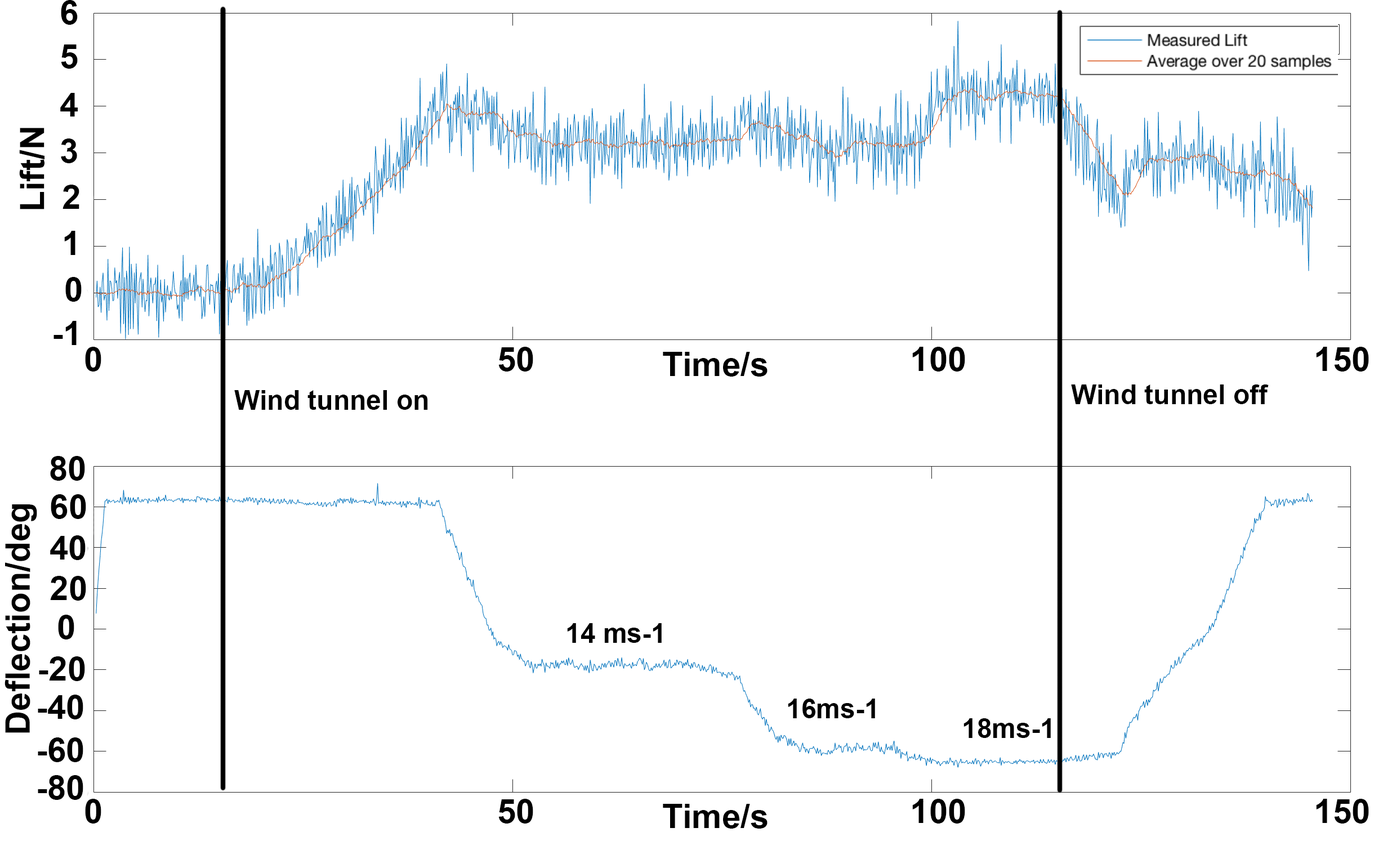
<style>
.page{position:relative;width:1374px;height:868px;background:#ffffff}
.page>*{position:absolute;margin:0}
.t1{font:33.8px "Arial-BoldMT";color:#000000}
.t2{font:33.7px "Arial-BoldMT";color:#000000}
.t3{font:34px "Arial-BoldMT";color:#000000}
</style>
<div class="page">
<p class="t1" style="left:61px;top:0px;width:17px;height:25px">6</p>
<p class="t1" style="left:61px;top:44px;width:17px;height:25px">5</p>
<p class="t1" style="left:60px;top:93px;width:18px;height:24px">4</p>
<p class="t2" style="left:19px;top:128px;width:25px;height:81px;rotate:-90deg">Lift/N</p>
<p class="t1" style="left:61px;top:138px;width:16px;height:25px">3</p>
<p class="t1" style="left:62px;top:185px;width:17px;height:24px">2</p>
<p class="t1" style="left:64px;top:231px;width:11px;height:24px">1</p>
<p class="t1" style="left:65px;top:277px;width:17px;height:25px">0</p>
<p class="t2" style="left:53px;top:321px;width:24px;height:24px">-1</p>
<p class="t1" style="left:85px;top:347px;width:1284px;height:25px">0                                          50                                        100                                     150</p>
<p class="t1" style="left:663px;top:352px;width:104px;height:25px">Time/s</p>
<p class="t1" style="left:50px;top:456px;width:35px;height:25px">80</p>
<p class="t1" style="left:51px;top:494px;width:35px;height:25px">60</p>
<p class="t3" style="left:5px;top:504px;width:32px;height:229px;rotate:-90deg">Deflection/deg</p>
<p class="t3" style="left:50px;top:535px;width:36px;height:25px">40</p>
<p class="t1" style="left:50px;top:576px;width:36px;height:25px">20</p>
<p class="t1" style="left:58px;top:615px;width:16px;height:25px">0</p>
<p class="t1" style="left:39px;top:656px;width:46px;height:25px">-20</p>
<p class="t1" style="left:38px;top:695px;width:45px;height:24px">-40</p>
<p class="t1" style="left:38px;top:737px;width:45px;height:25px">-60</p>
<p class="t1" style="left:38px;top:775px;width:45px;height:25px">-80</p>
<p class="t1" style="left:85px;top:799px;width:1284px;height:25px">0                                          50                                        100                                     150</p>
<p class="t1" style="left:663px;top:804px;width:104px;height:25px">Time/s</p>
</div>
